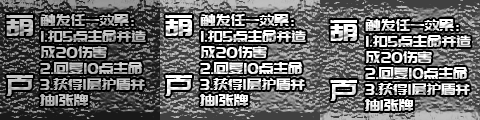
<style>
.page{position:relative;width:480px;height:120px}
.page>*{position:absolute;margin:0}
.t1{font:30px/60px "PangMenZhengDao";letter-spacing:-0.01em;color:#c0c0c0}
.t2{font:16px/16px "PangMenZhengDao";letter-spacing:-0.01em;color:#bfbfbf}
.t3{font:30px/60px "PangMenZhengDao";letter-spacing:-0.01em;color:#ffffff}
.t4{font:16px/16px "PangMenZhengDao";letter-spacing:-0.01em;color:#ffffff}
</style>
<div class="page">
<p class="t1" style="left:6px;top:15px;width:27px;height:81px">葫<br>芦</p>
<p class="t2" style="left:40px;top:14px;width:106px;height:92px">触发任一效果：<br>1.扣5点生命并造成20伤害<br>2.回复10点生命<br>3.获得1层护盾并<br>抽1张牌</p>
<p class="t3" style="left:165px;top:15px;width:27px;height:81px">葫<br>芦</p>
<p class="t4" style="left:200px;top:14px;width:106px;height:92px">触发任一效果：<br>1.扣5点生命并造成20伤害<br>2.回复10点生命<br>3.获得1层护盾并<br>抽1张牌</p>
<p class="t3" style="left:330px;top:20px;width:27px;height:81px">葫<br>芦</p>
<p class="t4" style="left:365px;top:19px;width:106px;height:92px">触发任一效果：<br>1.扣5点生命并造成20伤害<br>2.回复10点生命<br>3.获得1层护盾并<br>抽1张牌</p>
</div>
